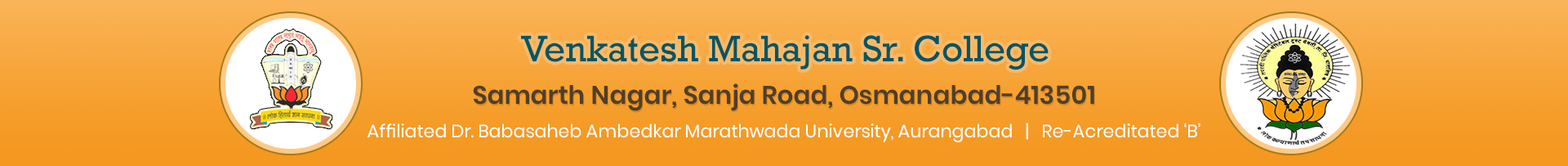
<style>
.page{position:relative;width:1568px;height:166px}
.page>*{position:absolute;margin:0}
.t1{font:37.6px "Rockwell";color:#045566}
.t2{font:25.3px "Poppins-SemiBold";color:#503e28}
.t3{font:25.3px "Poppins-SemiBold"}
.t4{font:18px "Poppins-Regular";color:#ffffff}
</style>
<div class="page">
<p class="t1" style="left:521px;top:35px;width:528px;height:35px">Venkatesh Mahajan Sr. College</p>
<p class="t2" style="left:473px;top:83px;width:621px;height:28px">Samarth Nagar, Sanja Road, Osmanabad-413501</p>
<p class="t3" style="left:474px;top:85px;width:621px;height:28px">Samarth Nagar, Sanja Road, Osmanabad-413501</p>
<p class="t4" style="left:368px;top:122px;width:832px;height:20px">Affiliated Dr. Babasaheb Ambedkar Marathwada University, Aurangabad   |   Re-Acreditated ‘B’</p>
</div>
